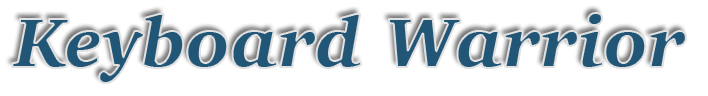
<style>
.page{position:relative;width:708px;height:96px;background:#ffffff}
.page>*{position:absolute;margin:0}
.t1{font:72px "Charter-BlackItalic";color:#225676}
</style>
<div class="page">
<p class="t1" style="left:12px;top:13px;width:674px;height:70px">Keyboard Warrior</p>
<p class="t1" style="left:12px;top:13px;width:674px;height:70px">Keyboard Warrior</p>
</div>
